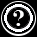
<style>
.page{position:relative;width:37px;height:37px;background:#000000}
.page>*{position:absolute;margin:0}
.t1{font:23.1px "EngraversMT";letter-spacing:-0.075em;color:#ffffff;text-transform:uppercase;scale:0.9 1}
</style>
<div class="page">
<p class="t1" style="left:13px;top:10px;width:11px;height:16px">?</p>
</div>
